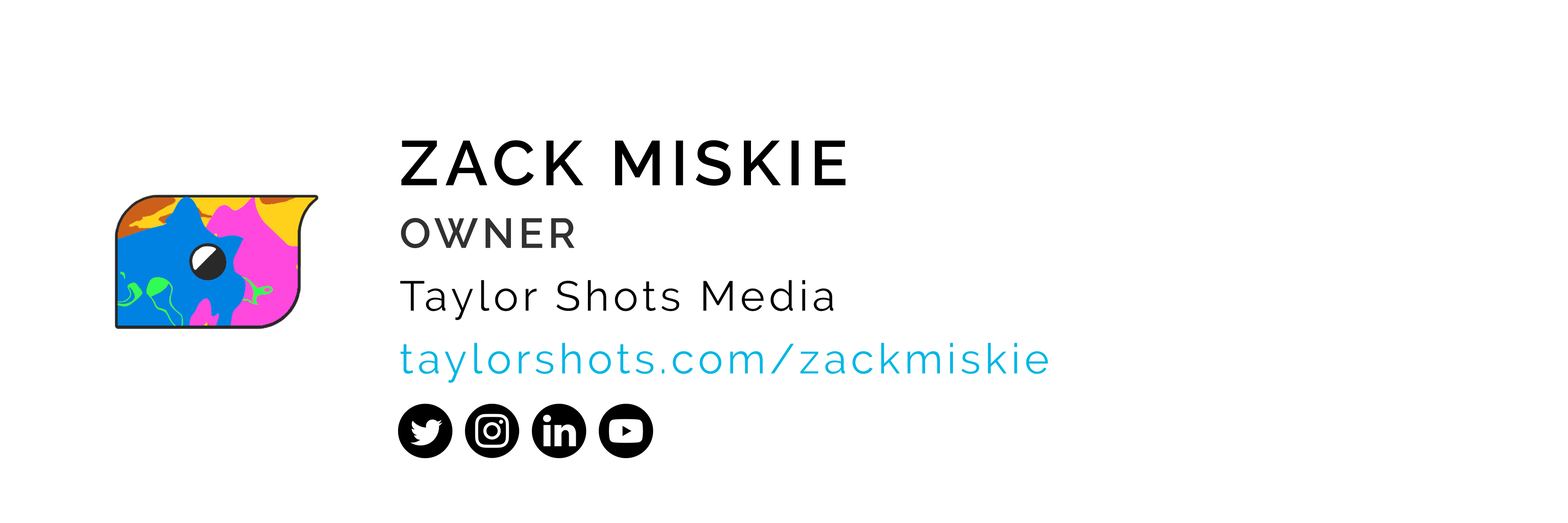
<style>
.page{position:relative;width:1568px;height:523px;background:#ffffff}
.page>*{position:absolute;margin:0}
.t1{font:41.8px/62.7px "Raleway-Regular";letter-spacing:0.1em;color:#00b6e3}
.t2{font:62.7px/62.7px "Raleway-SemiBold";letter-spacing:0.1em;color:#000000;text-transform:uppercase}
.t3{font:41.8px/62.7px "Raleway-SemiBold";letter-spacing:0.1em;color:#313131;text-transform:uppercase}
.t4{font:41.8px/62.7px "Raleway-Regular";letter-spacing:0.1em;color:#000000}
</style>
<div class="page">
<p class="t1" style="left:400px;top:140px;width:648px;height:243px"><span class="t2">Zack Miskie<br></span><span class="t3">Owner<br></span><span class="t4">Taylor Shots Media<br></span>taylorshots.com/zackmiskie</p>
</div>
